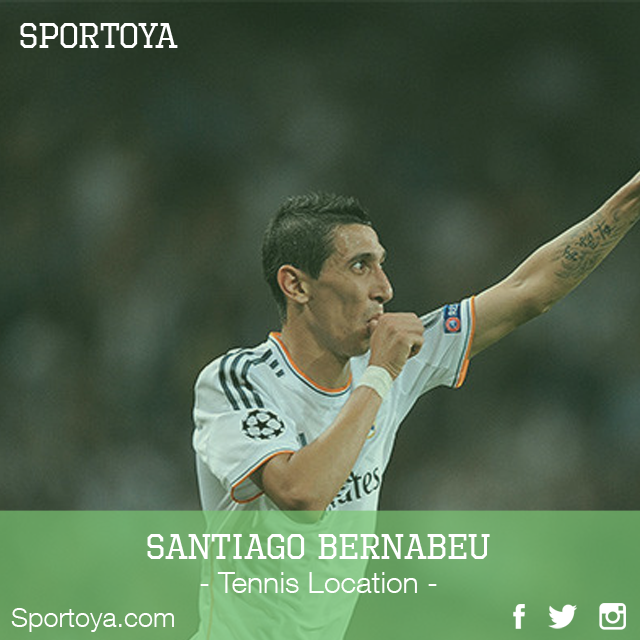
<style>
.page{position:relative;width:640px;height:640px}
.page>*{position:absolute;margin:0}
.t1{font:36px "OctinSportsRg-Regular";color:#ffffff}
.t2{font:30px "HelveticaNeueLTCom-Lt";color:#ffffff}
.t3{font:27px "HelveticaNeueLTCom-Lt";color:#ffffff}
</style>
<div class="page">
<p class="t1" style="left:20px;top:23px;width:158px;height:25px">SPORTOYa</p>
<p class="t1" style="left:147px;top:534px;width:343px;height:25px">SANTIAGO BERNABEU</p>
<p class="t2" style="left:200px;top:572px;width:237px;height:21px">- Tennis Location -</p>
<p class="t3" style="left:11px;top:608px;width:163px;height:24px">Sportoya.com</p>
</div>
